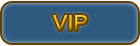
<style>
.page{position:relative;width:140px;height:46px;background:#2f5a80}
.page>*{position:absolute;margin:0}
.t1{font:24px "Latha"}
</style>
<div class="page">
<p class="t1" style="left:53px;top:15px;width:34px;height:15px">VIP</p>
</div>
